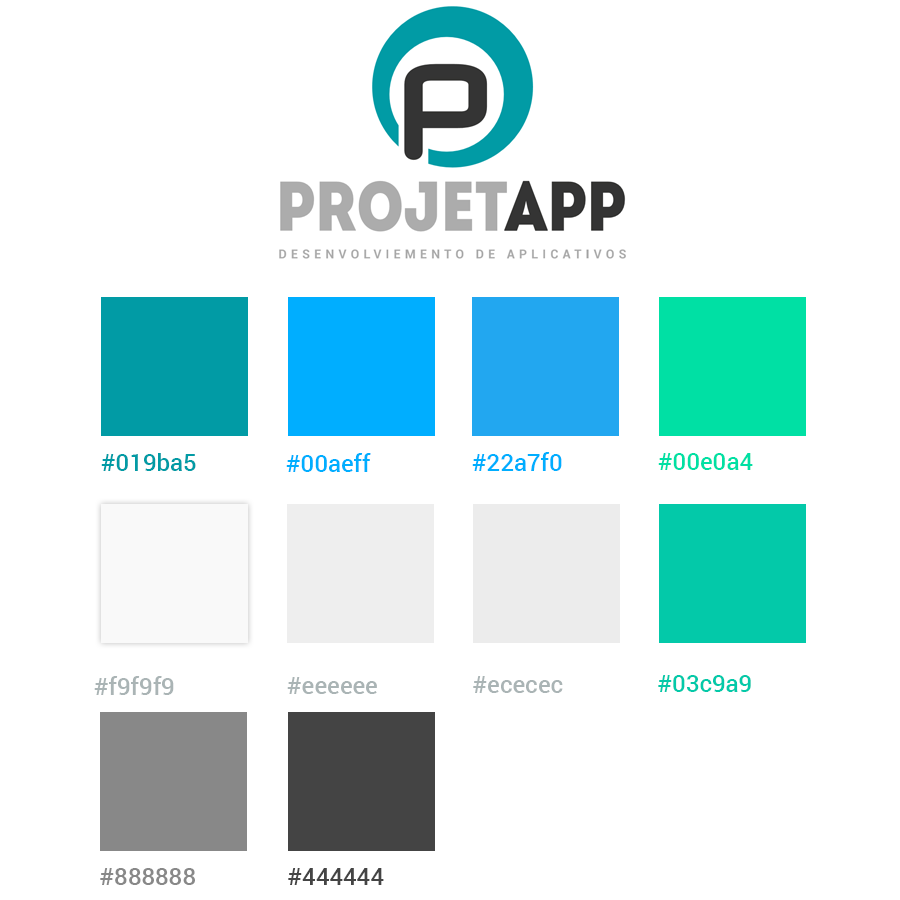
<style>
.page{position:relative;width:900px;height:900px;background:#ffffff}
.page>*{position:absolute;margin:0}
.t1{font:24px "Roboto-Medium";color:#019ba5}
.t2{font:24px "Roboto-Medium";color:#00aeff}
.t3{font:24px "Roboto-Medium";color:#00e0a4}
.t4{font:24px "Roboto-Medium";color:#aab4b5}
.t5{font:24px "Roboto-Medium";color:#03c9a9}
.t6{font:24px "Roboto-Medium";color:#888888}
.t7{font:24px "Roboto-Medium";color:#444444}
</style>
<div class="page">
<p class="t1" style="left:101px;top:453px;width:95px;height:18px">#019ba5</p>
<p class="t2" style="left:286px;top:453px;width:85px;height:19px">#00aeff</p>
<p class="t2" style="left:472px;top:452px;width:90px;height:19px">#22a7f0</p>
<p class="t3" style="left:658px;top:453px;width:95px;height:17px">#00e0a4</p>
<p class="t4" style="left:94px;top:676px;width:80px;height:19px">#f9f9f9</p>
<p class="t4" style="left:287px;top:677px;width:90px;height:17px">#eeeeee</p>
<p class="t4" style="left:473px;top:676px;width:90px;height:17px">#ececec</p>
<p class="t5" style="left:658px;top:675px;width:93px;height:17px">#03c9a9</p>
<p class="t6" style="left:100px;top:868px;width:95px;height:17px">#888888</p>
<p class="t7" style="left:288px;top:868px;width:96px;height:17px">#444444</p>
</div>
